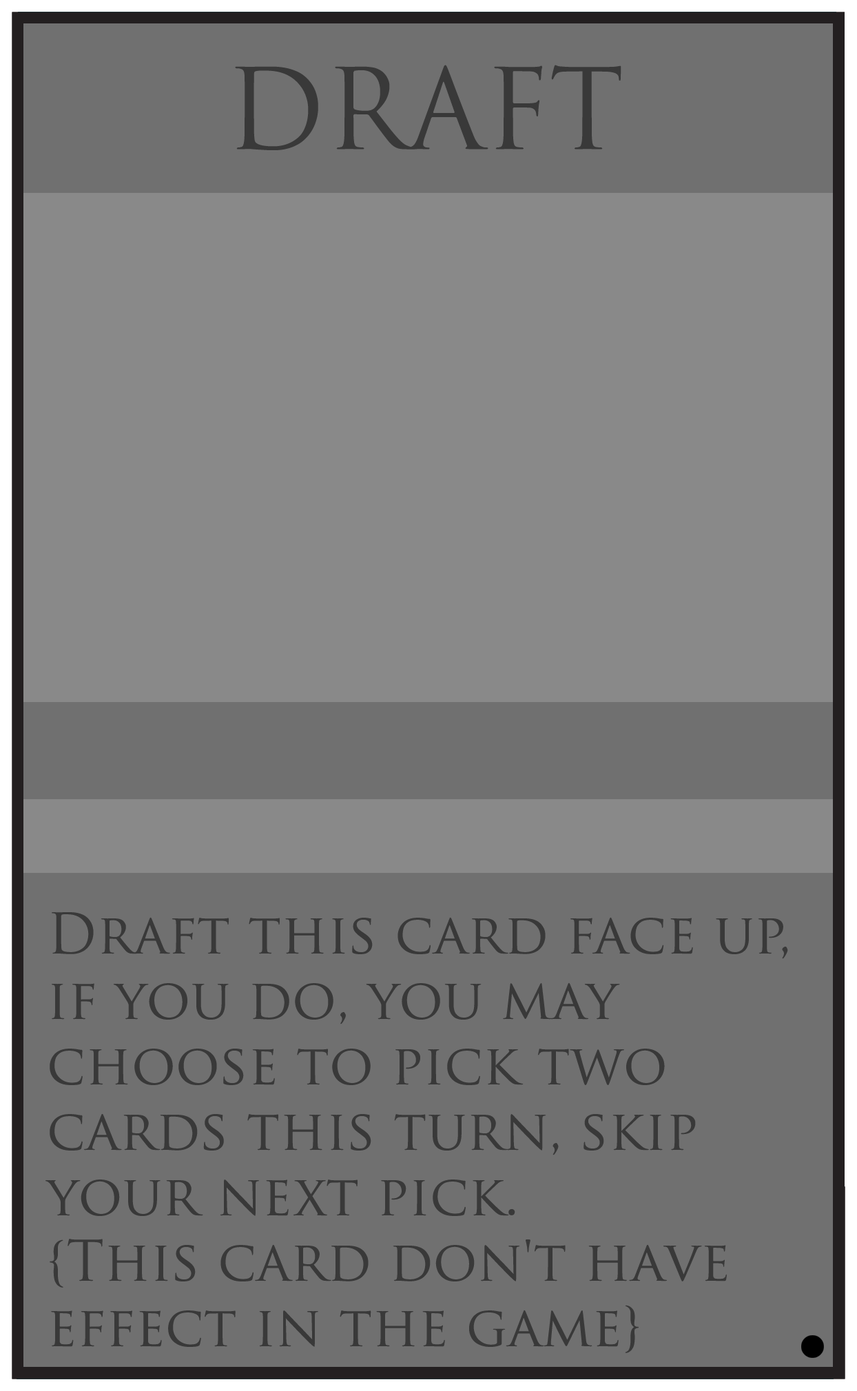
<style>
.page{position:relative;width:857px;height:1391px;background:#707070}
.page>*{position:absolute;margin:0}
.t1{font:109.1px "TrajanPro-Regular";color:#393939}
.t2{font:54.5px "TrajanPro-Regular";color:#393939}
</style>
<div class="page">
<p class="t1" style="left:235px;top:65px;width:387px;height:85px">DRAFT</p>
<p class="t2" style="left:45px;top:912px;width:743px;height:441px">Draft this card face up, <br>if you do, you may <br>choose to pick two<br>cards this turn, skip <br>your next pick. <br>{This card don't have <br>effect in the game}</p>
</div>
